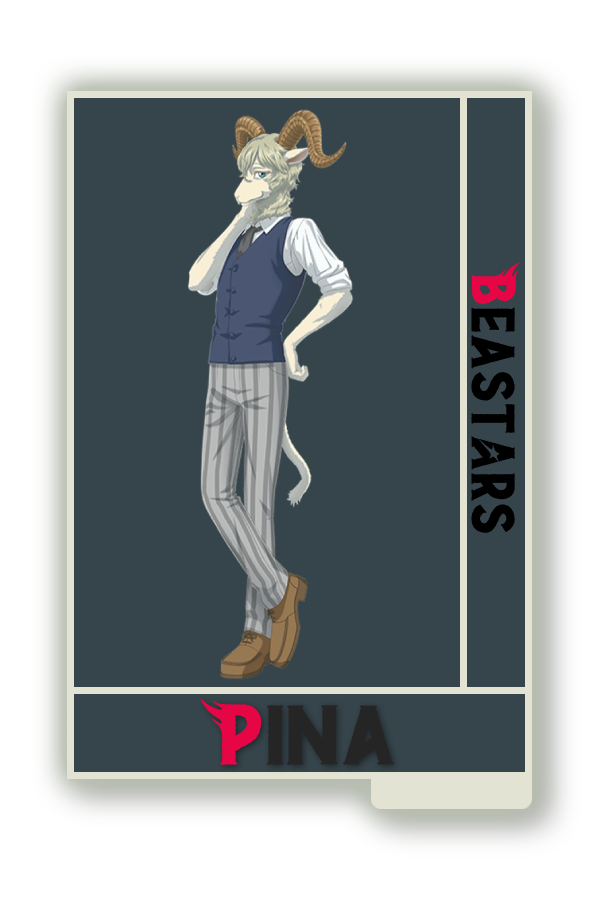
<style>
.page{position:relative;width:600px;height:900px;background:#36454b}
.page>*{position:absolute;margin:0}
.t1{font:48.8px "BEAST";color:#000000}
.t2{font:48.8px "BEAST";color:#e60646}
.t3{font:67px "BEAST";color:#252525;scale:1.12 1}
.t4{font:67px "BEAST";color:#e60646;scale:1.12 1}
</style>
<div class="page">
<p class="t1" style="left:471px;top:262px;width:50px;height:271px;rotate:90deg"><span class="t2">B</span>east@rs</p>
<p class="t3" style="left:200px;top:698px;width:195px;height:67px"><span class="t4">P</span>ina</p>
</div>
